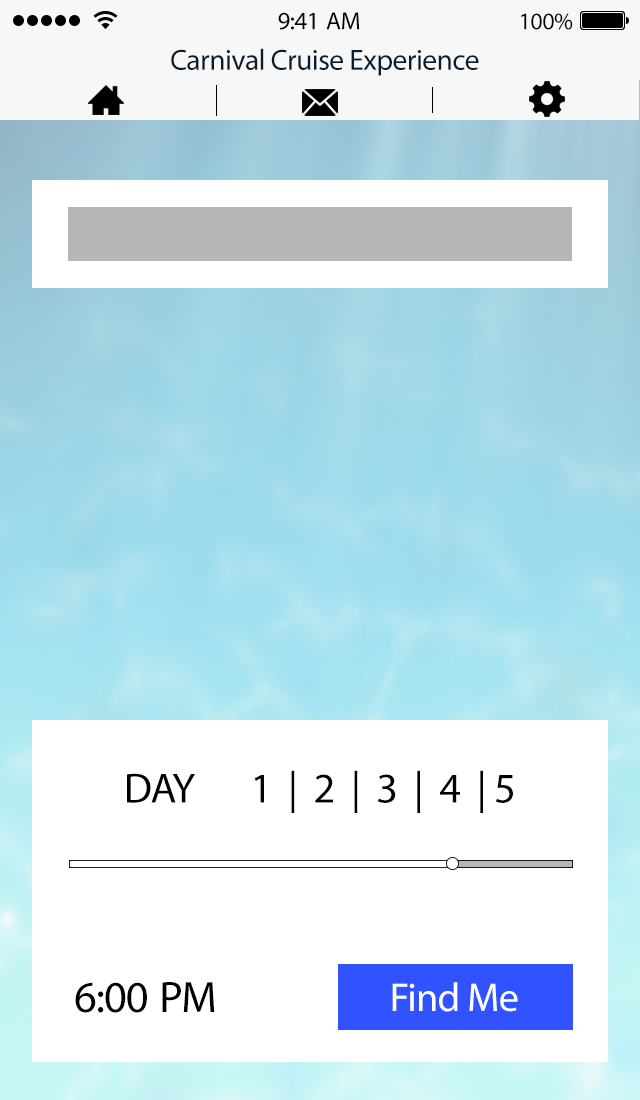
<style>
.page{position:relative;width:640px;height:1100px;background:#ffffff}
.page>*{position:absolute;margin:0}
.t1{font:25px "MyriadPro-Regular";letter-spacing:-0.02em;color:#000000}
.t2{font:24px "MyriadPro-Regular";letter-spacing:-0.02em;color:#000000}
.t3{font:29.4px "MyriadPro-Regular";letter-spacing:-0.02em;color:#061d30}
.t4{font:42.3px "MyriadPro-Regular";letter-spacing:-0.02em;color:#000000}
.t5{font:44.2px "MyriadPro-Regular";letter-spacing:-0.02em;color:#000000}
.t6{font:40.5px "MyriadPro-Regular";letter-spacing:-0.02em;color:#ffffff}
</style>
<div class="page">
<p class="t1" style="left:278px;top:12px;width:82px;height:18px">9:41 AM</p>
<p class="t2" style="left:521px;top:13px;width:52px;height:17px">100%</p>
<p class="t3" style="left:171px;top:48px;width:308px;height:28px">Carnival Cruise Experience</p>
<p class="t4" style="left:127px;top:770px;width:386px;height:43px">DAY 1  |  2  |  3  |  4  | 5</p>
<p class="t5" style="left:75px;top:982px;width:140px;height:31px">6:00 PM</p>
<p class="t6" style="left:392px;top:982px;width:126px;height:30px">Find Me</p>
</div>
